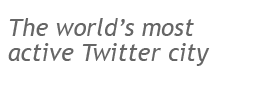
<style>
.page{position:relative;width:280px;height:100px;background:#ffffff}
.page>*{position:absolute;margin:0}
.t1{font:24px/25px "TrebuchetMS-Italic";color:#666666}
</style>
<div class="page">
<p class="t1" style="left:8px;top:18px;width:202px;height:48px">The world’s most <br>active Twitter city</p>
</div>
